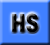
<style>
.page{position:relative;width:50px;height:45px;background:#4080ff}
.page>*{position:absolute;margin:0}
.t1{font:24px "GothicXB-HM"}
</style>
<div class="page">
<p class="t1" style="left:12px;top:13px;width:26px;height:19px">HS</p>
</div>
